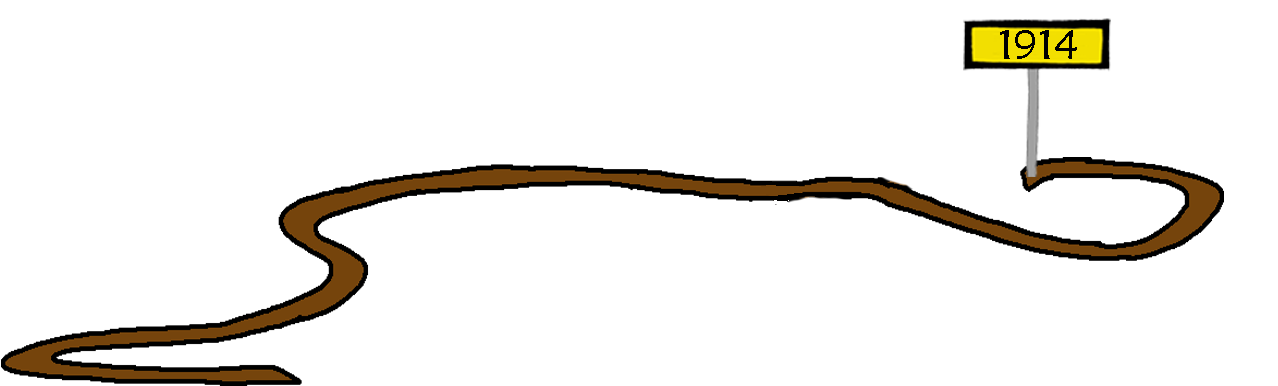
<style>
.page{position:relative;width:1278px;height:386px;background:#ffffff}
.page>*{position:absolute;margin:0}
.t1{font:41.7px "MaiandraGD-Regular";color:#000000}
</style>
<div class="page">
<p class="t1" style="left:1000px;top:30px;width:77px;height:29px">1914</p>
</div>
